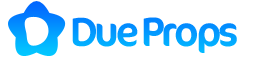
<style>
.page{position:relative;width:280px;height:58px;background:#ffffff}
.page>*{position:absolute;margin:0}
.t1{font:41.2px "Cocon-Regular";letter-spacing:-0.08em;color:#029fff}
</style>
<div class="page">
<p class="t1" style="left:72px;top:17px;width:165px;height:36px">Due Props</p>
</div>
